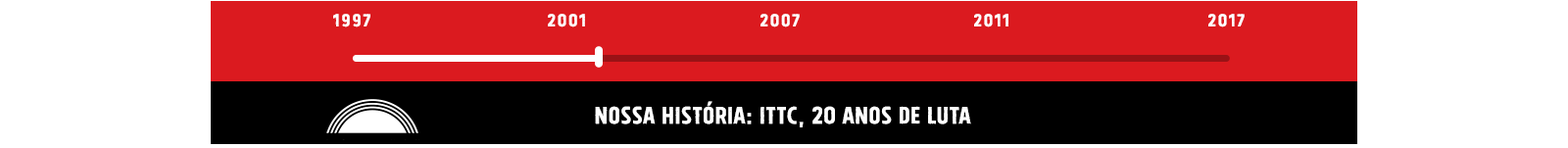
<style>
.page{position:relative;width:1568px;height:148px;background:#db1a1f}
.page>*{position:absolute;margin:0}
.t1{font:21.6px "TolyerX-VintageNo1";letter-spacing:0.08em;color:#ffffff;text-transform:uppercase}
.t2{font:29.4px "TolyerX-VintageNo1";color:#ffffff;text-transform:uppercase}
</style>
<div class="page">
<p class="t1" style="left:333px;top:14px;width:37px;height:13px">1997</p>
<p class="t1" style="left:548px;top:14px;width:37px;height:13px">2001</p>
<p class="t1" style="left:760px;top:14px;width:40px;height:13px">2007</p>
<p class="t1" style="left:974px;top:14px;width:34px;height:13px">2011</p>
<p class="t1" style="left:1208px;top:14px;width:37px;height:13px">2017</p>
<p class="t2" style="left:595px;top:101px;width:376px;height:26px">nossa história: ittc, 20 anos de luta</p>
</div>
